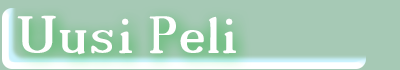
<style>
.page{position:relative;width:400px;height:70px;background:#a6c9b5}
.page>*{position:absolute;margin:0}
.t1{font:72px "18thCentury";color:#ffffff}
</style>
<div class="page">
<p class="t1" style="left:17px;top:15px;width:219px;height:40px">Uusi Peli</p>
</div>
